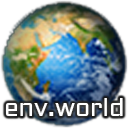
<style>
.page{position:relative;width:128px;height:128px}
.page>*{position:absolute;margin:0}
.t1{font:24.6px "Aldrich-Regular";color:#ffffff}
</style>
<div class="page">
<p class="t1" style="left:6px;top:98px;width:117px;height:18px">env.world</p>
</div>
